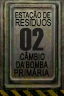
<style>
.page{position:relative;width:64px;height:96px}
.page>*{position:absolute;margin:0}
.t1{font:8.3px "ArialMT";color:#080705;text-transform:uppercase;scale:0.65 1}
.t2{font:8.3px "ArialMT";color:#080705;scale:0.65 1}
.t3{font:9.2px "ArialMT";color:#080705;text-transform:uppercase;scale:0.72 1}
.t4{font:9.2px "ArialMT";color:#080705;text-transform:uppercase;font-weight:bold;scale:0.63 1}
.t5{font:9.2px "ArialMT";color:#080705;text-transform:uppercase;font-weight:bold;scale:0.61 1}
.t6{font:9.2px "ArialMT";color:#080705;text-transform:uppercase;font-weight:bold;scale:0.72 1}
</style>
<div class="page">
<p class="t1" style="left:15px;top:10px;width:36px;height:10px"><span class="t2">E</span>stação de</p>
<p class="t3" style="left:15px;top:19px;width:37px;height:7px">residuos</p>
<p class="t4" style="left:20px;top:51px;width:25px;height:10px">CÂMBIO</p>
<p class="t5" style="left:16px;top:61px;width:32px;height:8px">DA BOMBA</p>
<p class="t6" style="left:14px;top:67px;width:35px;height:10px">PRIMÁRIA</p>
</div>
